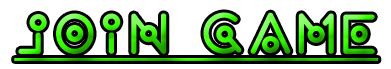
<style>
.page{position:relative;width:391px;height:69px;background:#ffffff}
.page>*{position:absolute;margin:0}
.t1{font:58.3px "wearealien!!";text-decoration:underline}
</style>
<div class="page">
<p class="t1" style="left:14px;top:12px;width:365px;height:49px">join Game</p>
</div>
